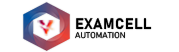
<style>
.page{position:relative;width:179px;height:52px;background:#ffffff}
.page>*{position:absolute;margin:0}
.t1{font:8.3px/8.3px "Bahnschrift-Light";letter-spacing:0.025em;color:#000000}
.t2{font:15.1px "Bahnschrift-Bold";letter-spacing:0.025em;color:#000000}
</style>
<div class="page">
<p class="t1" style="left:75px;top:18px;width:77px;height:21px"><span class="t2">EXAMCELL<br></span>AUTOMATION</p>
</div>
